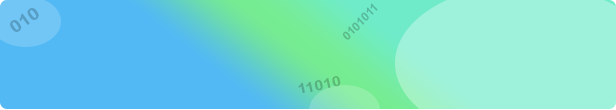
<style>
.page{position:relative;width:616px;height:110px;background:#9ef2db}
.page>*{position:absolute;margin:0}
.t1{font:11.6px "Arial-BoldMT";color:#57ba9a;scale:1.03 1}
.t2{font:17px "Arial-BoldMT";color:#589dc3;scale:1.16 1}
.t3{font:13.9px "Arial-BoldMT";color:#58b47e;scale:1.16 1}
</style>
<div class="page">
<p class="t1" style="left:342px;top:3px;width:36px;height:37px;rotate:-46deg">0101011</p>
<p class="t2" style="left:10px;top:8px;width:29px;height:24px;rotate:-36deg">010</p>
<p class="t3" style="left:298px;top:76px;width:43px;height:18px;rotate:-12deg">11010</p>
</div>
